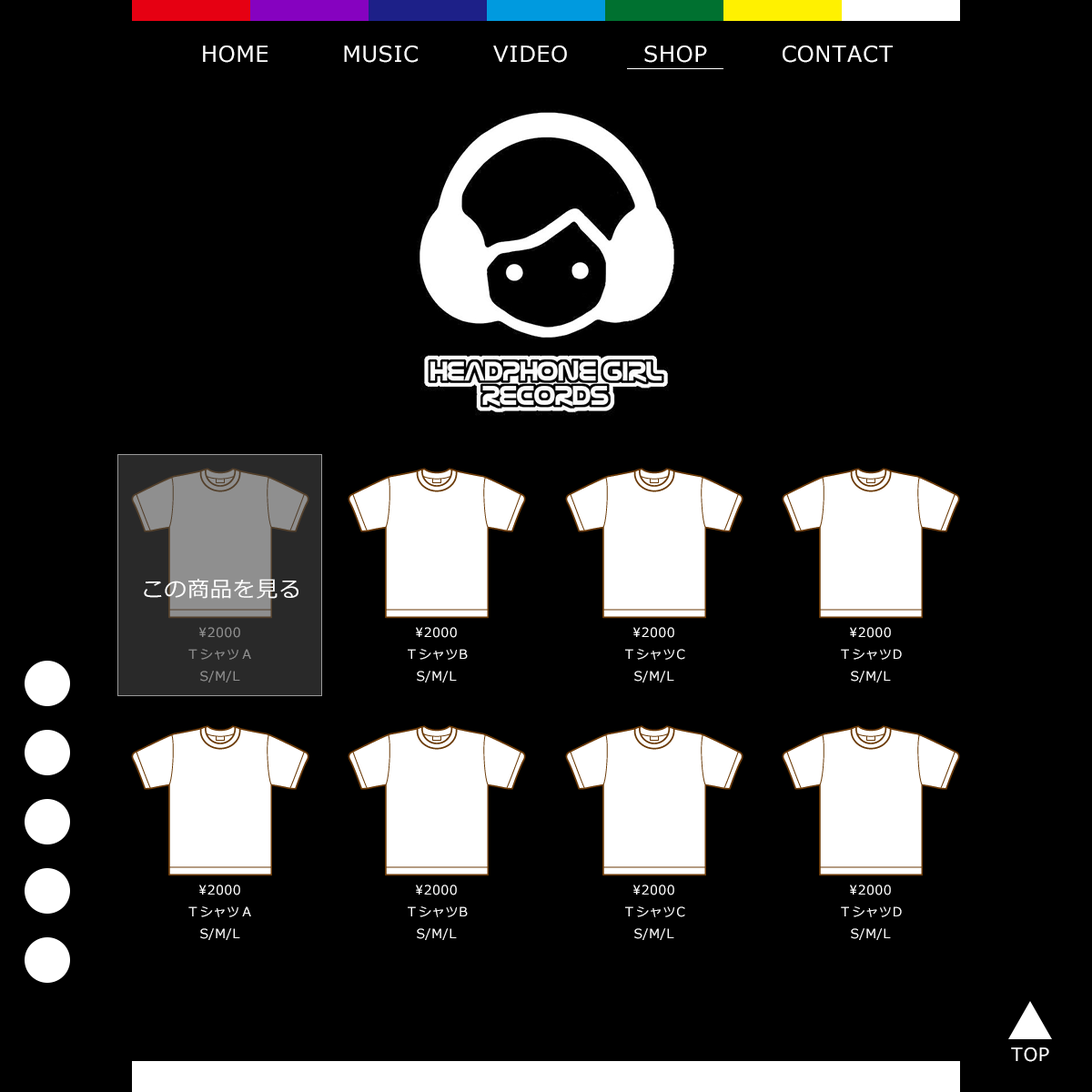
<style>
.page{position:relative;width:1092px;height:1092px;background:#000000}
.page>*{position:absolute;margin:0}
.t1{font:21.8px "Meiryo";letter-spacing:0.05em;color:#ffffff}
.t2{font:12.7px/21.8px "Meiryo";letter-spacing:0.05em;color:#8f8f8f}
.t3{font:12.7px/21.8px "Meiryo";letter-spacing:0.05em;color:#ffffff}
.t4{font:18.2px "Meiryo";letter-spacing:0.05em;color:#ffffff}
</style>
<div class="page">
<p class="t1" style="left:203px;top:45px;width:65px;height:18px">HOME</p>
<p class="t1" style="left:344px;top:45px;width:74px;height:18px">MUSIC</p>
<p class="t1" style="left:493px;top:45px;width:74px;height:18px">VIDEO</p>
<p class="t1" style="left:644px;top:45px;width:63px;height:18px">SHOP</p>
<p class="t1" style="left:783px;top:45px;width:110px;height:18px">CONTACT</p>
<p class="t1" style="left:144px;top:579px;width:154px;height:20px">この商品を見る</p>
<p class="t2" style="left:188px;top:627px;width:63px;height:55px;text-align:center">\2000<br>ＴシャツＡ<br>S/M/L</p>
<p class="t3" style="left:408px;top:627px;width:60px;height:55px;text-align:center">\2000<br>ＴシャツB<br>S/M/L</p>
<p class="t3" style="left:625px;top:627px;width:60px;height:55px;text-align:center">\2000<br>ＴシャツC<br>S/M/L</p>
<p class="t3" style="left:841px;top:627px;width:61px;height:55px;text-align:center">\2000<br>ＴシャツD<br>S/M/L</p>
<p class="t3" style="left:188px;top:885px;width:63px;height:55px;text-align:center">\2000<br>ＴシャツＡ<br>S/M/L</p>
<p class="t3" style="left:408px;top:885px;width:60px;height:55px;text-align:center">\2000<br>ＴシャツB<br>S/M/L</p>
<p class="t3" style="left:625px;top:885px;width:60px;height:55px;text-align:center">\2000<br>ＴシャツC<br>S/M/L</p>
<p class="t3" style="left:841px;top:885px;width:61px;height:55px;text-align:center">\2000<br>ＴシャツD<br>S/M/L</p>
<p class="t4" style="left:1011px;top:1047px;width:38px;height:15px">TOP</p>
</div>
